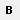
<style>
.page{position:relative;width:20px;height:20px;background:#efefef}
.page>*{position:absolute;margin:0}
.t1{font:11.2px "Verdana-Bold";color:#000000}
</style>
<div class="page">
<p class="t1" style="left:6px;top:6px;width:6px;height:8px">B</p>
</div>
